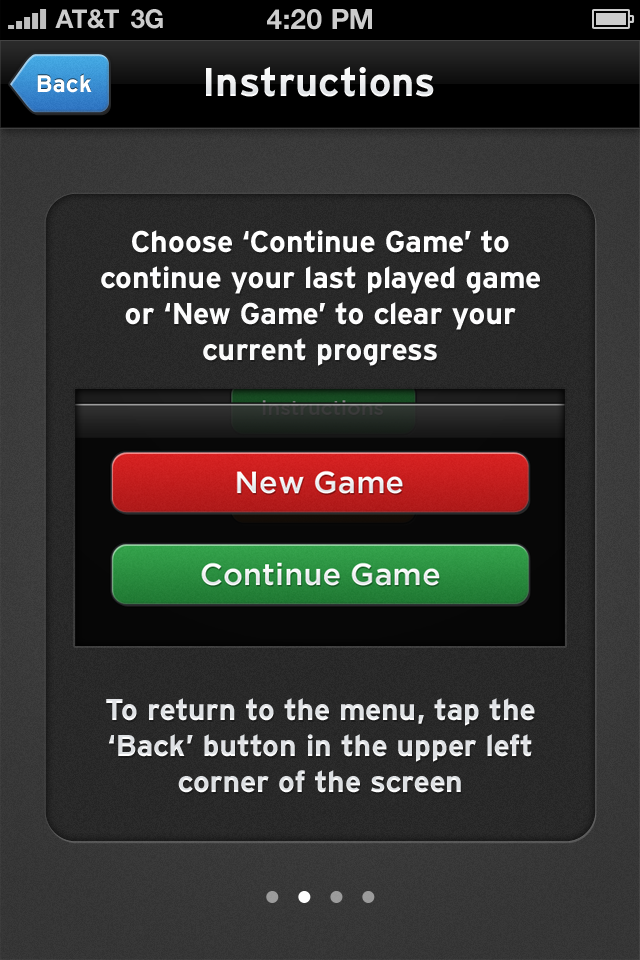
<style>
.page{position:relative;width:640px;height:960px}
.page>*{position:absolute;margin:0}
.t1{font:26px "HelveticaNeue-Bold";color:#cccccc;text-transform:uppercase}
.t2{font:28px "HelveticaNeue-Bold";color:#cccccc;text-transform:uppercase}
.t3{font:24px "Interstate-Bold";color:#ffffff}
.t4{font:40px "Interstate-Bold";color:#ffffff}
.t5{font:30px "Interstate-Bold";color:#ffffff}
</style>
<div class="page">
<p class="t1" style="left:55px;top:9px;width:64px;height:20px">AT&amp;T</p>
<p class="t1" style="left:131px;top:9px;width:32px;height:20px">3G</p>
<p class="t2" style="left:267px;top:9px;width:105px;height:21px">4:20 pM</p>
<p class="t3" style="left:37px;top:74px;width:55px;height:19px">Back</p>
<p class="t4" style="left:206px;top:66px;width:228px;height:31px">Instructions</p>
<p class="t5" style="left:101px;top:230px;width:439px;height:563px;text-align:center">Choose ‘Continue Game’ to continue your last played game or ‘New Game’ to clear your current progress<br><br><br><br><br><br><br><br><br><br>To return to the menu, tap the ‘Back’ button in the upper left corner of the screen</p>
</div>
